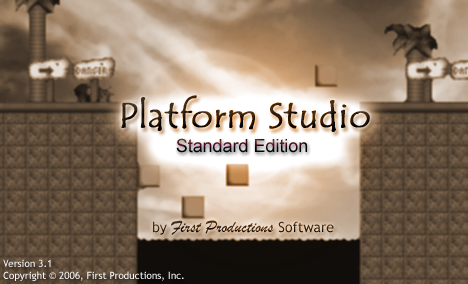
<style>
.page{position:relative;width:468px;height:284px}
.page>*{position:absolute;margin:0}
.t1{font:35.9px "TempusSansITC";font-weight:bold}
.t2{font:17.9px "ArialMT"}
.t3{font:17.9px "BrushScriptMT";color:#38291b}
.t4{font:13.9px "TrebuchetMS";color:#38291b}
.t5{font:10px "TrebuchetMS";color:#e7edf8}
</style>
<div class="page">
<p class="t1" style="left:121px;top:95px;width:249px;height:37px">Platform Studio</p>
<p class="t2" style="left:176px;top:138px;width:131px;height:15px">Standard Edition</p>
<p class="t3" style="left:153px;top:220px;width:181px;height:15px"><span class="t4">by </span>First Productions <span class="t4">Software</span></p>
<p class="t5" style="left:3px;top:259px;width:181px;height:22px">Version 3.1<br>Copyright © 2006, First Productions, Inc.</p>
</div>
